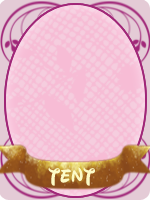
<style>
.page{position:relative;width:150px;height:200px}
.page>*{position:absolute;margin:0}
.t1{font:37.4px "Waltograph";color:#fcfac7}
</style>
<div class="page">
<p class="t1" style="left:48px;top:167px;width:47px;height:19px">tent</p>
</div>
